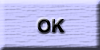
<style>
.page{position:relative;width:100px;height:50px}
.page>*{position:absolute;margin:0}
.t1{font:18px "Arial-BoldMT";color:#000000}
</style>
<div class="page">
<p class="t1" style="left:37px;top:18px;width:27px;height:15px">OK</p>
</div>
